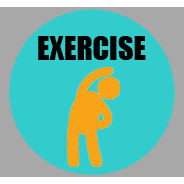
<style>
.page{position:relative;width:184px;height:184px;background:#33cccc}
.page>*{position:absolute;margin:0}
.t1{font:30px "Impact";color:#000000}
</style>
<div class="page">
<p class="t1" style="left:38px;top:36px;width:108px;height:24px">EXERCISE</p>
</div>
